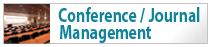
<style>
.page{position:relative;width:211px;height:47px;background:#ffffff}
.page>*{position:absolute;margin:0}
.t1{font:20px "MyriadPro-Bold";color:#11839a;scale:0.78 1}
</style>
<div class="page">
<p class="t1" style="left:58px;top:7px;width:142px;height:16px">Conference / Journal</p>
<p class="t1" style="left:60px;top:25px;width:91px;height:18px">Management</p>
</div>
